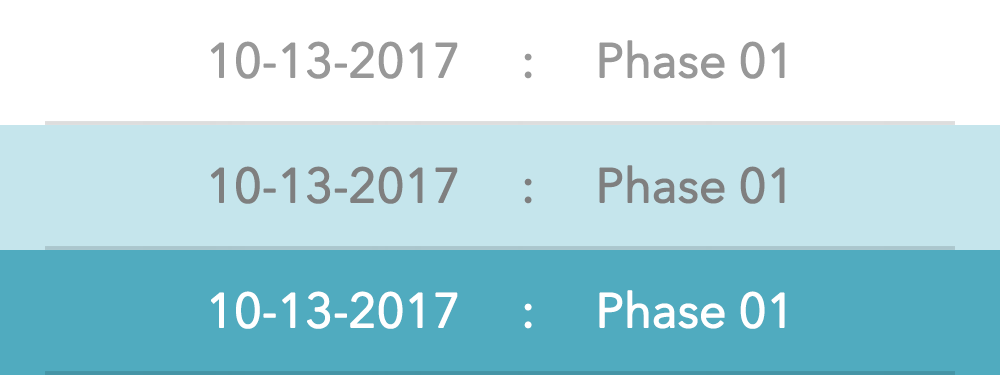
<style>
.page{position:relative;width:1000px;height:375px;background:#ffffff}
.page>*{position:absolute;margin:0}
.t1{font:48px "AvenirNextLTPro-Regular";letter-spacing:-0.025em;color:#989898;font-weight:bold}
.t2{font:48px "AvenirNextLTPro-Regular";letter-spacing:-0.025em;color:#7f7f7f;font-weight:bold}
.t3{font:48px "AvenirNextLTPro-Regular";letter-spacing:-0.025em;color:#ffffff;font-weight:bold}
</style>
<div class="page">
<p class="t1" style="left:211px;top:40px;width:574px;height:39px">10-13-2017     :     Phase 01</p>
<p class="t2" style="left:211px;top:165px;width:574px;height:39px">10-13-2017     :     Phase 01</p>
<p class="t3" style="left:211px;top:290px;width:574px;height:39px">10-13-2017     :     Phase 01</p>
</div>
